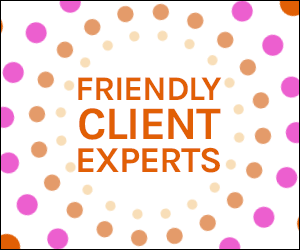
<style>
.page{position:relative;width:300px;height:250px;background:#ffffff}
.page>*{position:absolute;margin:0}
.t1{font:34.5px/34px "Karla-Bold";letter-spacing:-0.037em;color:#e15f05}
.t2{font:46.5px/39px "Karla-Bold";letter-spacing:-0.037em;color:#e15f05}
.t3{font:36.5px/33px "Karla-Bold";letter-spacing:-0.037em;color:#e15f05}
</style>
<div class="page">
<p class="t1" style="left:78px;top:77px;width:144px;height:96px;text-align:center">FRIENDLY<br><span class="t2">CLIENT<br></span><span class="t3">EXPERTS</span></p>
</div>
